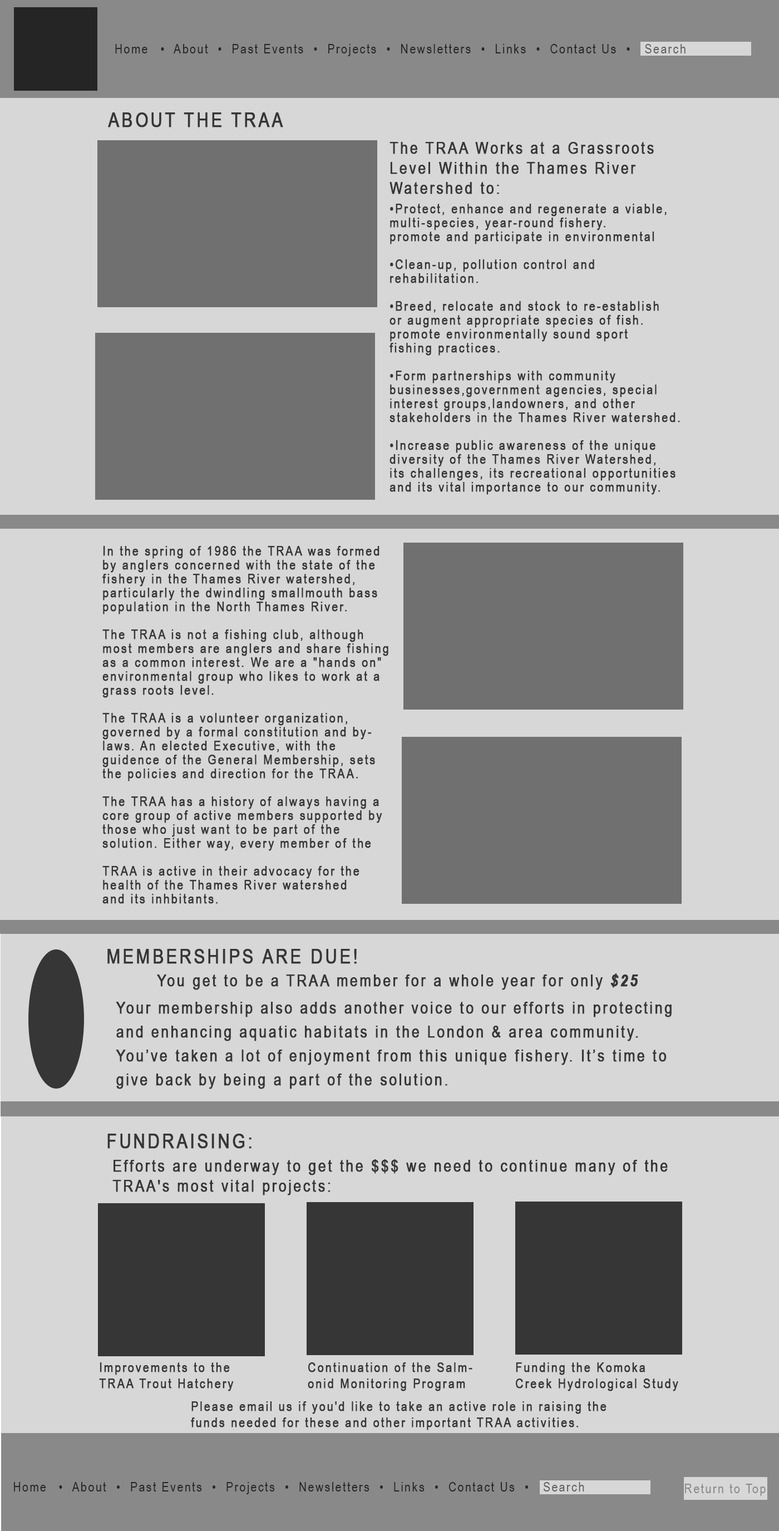
<style>
.page{position:relative;width:779px;height:1531px;background:#d7d7d7}
.page>*{position:absolute;margin:0}
.t1{font:13.4px "ArialNarrow";letter-spacing:0.1em;color:#252525}
.t2{font:13.4px "ArialNarrow";letter-spacing:0.1em;color:#5f5f5f}
.t3{font:20px "ArialNarrow";letter-spacing:0.1em;color:#363636;font-weight:bold}
.t4{font:16.7px "ArialNarrow";letter-spacing:0.1em;color:#363636;font-weight:bold}
.t5{font:13.4px/13.9px "ArialNarrow";letter-spacing:0.1em;color:#363636;font-weight:bold}
.t6{font:16.7px "ArialNarrow-BoldItalic";letter-spacing:0.1em;color:#363636;font-weight:bold}
.t7{font:16.7px/23.9px "ArialNarrow";letter-spacing:0.1em;color:#363636;font-weight:bold}
.t8{font:13.4px "ArialNarrow";letter-spacing:0.1em;color:#363636;font-weight:bold}
.t9{font:13.4px "ArialNarrow";letter-spacing:0.1em;color:#898989}
.t10{font:8.9px "ArialNarrow";letter-spacing:0.1em;color:#898989}
</style>
<div class="page">
<p class="t1" style="left:115px;top:44px;width:571px;height:12px">Home  •  About  •  Past Events  •  Projects  •  Newsletters  •  Links  •  Contact Us  •   <span class="t2">Search</span></p>
<p class="t3" style="left:108px;top:112px;width:175px;height:15px">ABOUT THE TRAA</p>
<p class="t4" style="left:389px;top:142px;width:265px;height:52px">The TRAA Works at a Grassroots <br>Level Within the Thames River <br>Watershed to:</p>
<p class="t5" style="left:389px;top:204px;width:291px;height:291px">•Protect, enhance and regenerate a viable, <br>multi-species, year-round fishery.<br>promote and participate in environmental <br><br>•Clean-up, pollution control and <br>rehabilitation.<br><br>•Breed, relocate and stock to re-establish <br>or augment appropriate species of fish.<br>promote environmentally sound sport <br>fishing practices.<br><br>•Form partnerships with community <br>businesses,government agencies, special <br>interest groups,landowners, and other <br>stakeholders in the Thames River watershed.<br><br>•Increase public awareness of the unique <br>diversity of the Thames River Watershed, <br>its challenges, its recreational opportunities <br>and its vital importance to our community.</p>
<p class="t5" style="left:102px;top:546px;width:286px;height:358px">In the spring of 1986 the TRAA was formed <br>by anglers concerned with the state of the <br>fishery in the Thames River watershed, <br>particularly the dwindling smallmouth bass <br>population in the North Thames River.<br><br>The TRAA is not a fishing club, although <br>most members are anglers and share fishing <br>as a common interest. We are a "hands on" <br>environmental group who likes to work at a <br>grass roots level.<br><br>The TRAA is a volunteer organization, <br>governed by a formal constitution and by-<br>laws. An elected Executive, with the <br>guidence of the General Membership, sets <br>the policies and direction for the TRAA.<br><br>The TRAA has a history of always having a <br>core group of active members supported by <br>those who just want to be part of the <br>solution. Either way, every member of the <br><br>TRAA is active in their advocacy for the <br>health of the Thames River watershed <br>and its inhbitants.</p>
<p class="t3" style="left:107px;top:949px;width:250px;height:15px">MEMBERSHIPS ARE DUE!</p>
<p class="t4" style="left:157px;top:973px;width:481px;height:17px">You get to be a TRAA member for a whole year for only <span class="t6">$25</span></p>
<p class="t7" style="left:116px;top:1002px;width:556px;height:87px">Your membership also adds another voice to our efforts in protecting <br>and enhancing aquatic habitats in the London &amp; area community.<br>You’ve taken a lot of enjoyment from this unique fishery. It’s time to<br>give back by being a part of the solution.</p>
<p class="t3" style="left:107px;top:1133px;width:145px;height:15px">FUNDRAISING:</p>
<p class="t4" style="left:112px;top:1159px;width:556px;height:36px">Efforts are underway to get the $$$ we need to continue many of the<br>TRAA's most vital projects:</p>
<p class="t8" style="left:99px;top:1362px;width:135px;height:29px">Improvements to the<br>TRAA Trout Hatchery</p>
<p class="t8" style="left:308px;top:1362px;width:164px;height:29px">Continuation of the Salm-<br>onid Monitoring Program</p>
<p class="t8" style="left:516px;top:1362px;width:162px;height:29px">Funding the Komoka<br>Creek Hydrological Study</p>
<p class="t8" style="left:191px;top:1401px;width:416px;height:29px">Please email us if you'd like to take an active role in raising the <br>funds needed for these and other important TRAA activities.</p>
<p class="t1" style="left:14px;top:1482px;width:570px;height:12px">Home  •  About  •  Past Events  •  Projects  •  Newsletters  •  Links  •  Contact Us  •   <span class="t2">Search</span></p>
<p class="t9" style="left:685px;top:1483px;width:81px;height:13px"><span class="t10"><br></span>Return to Top</p>
</div>
